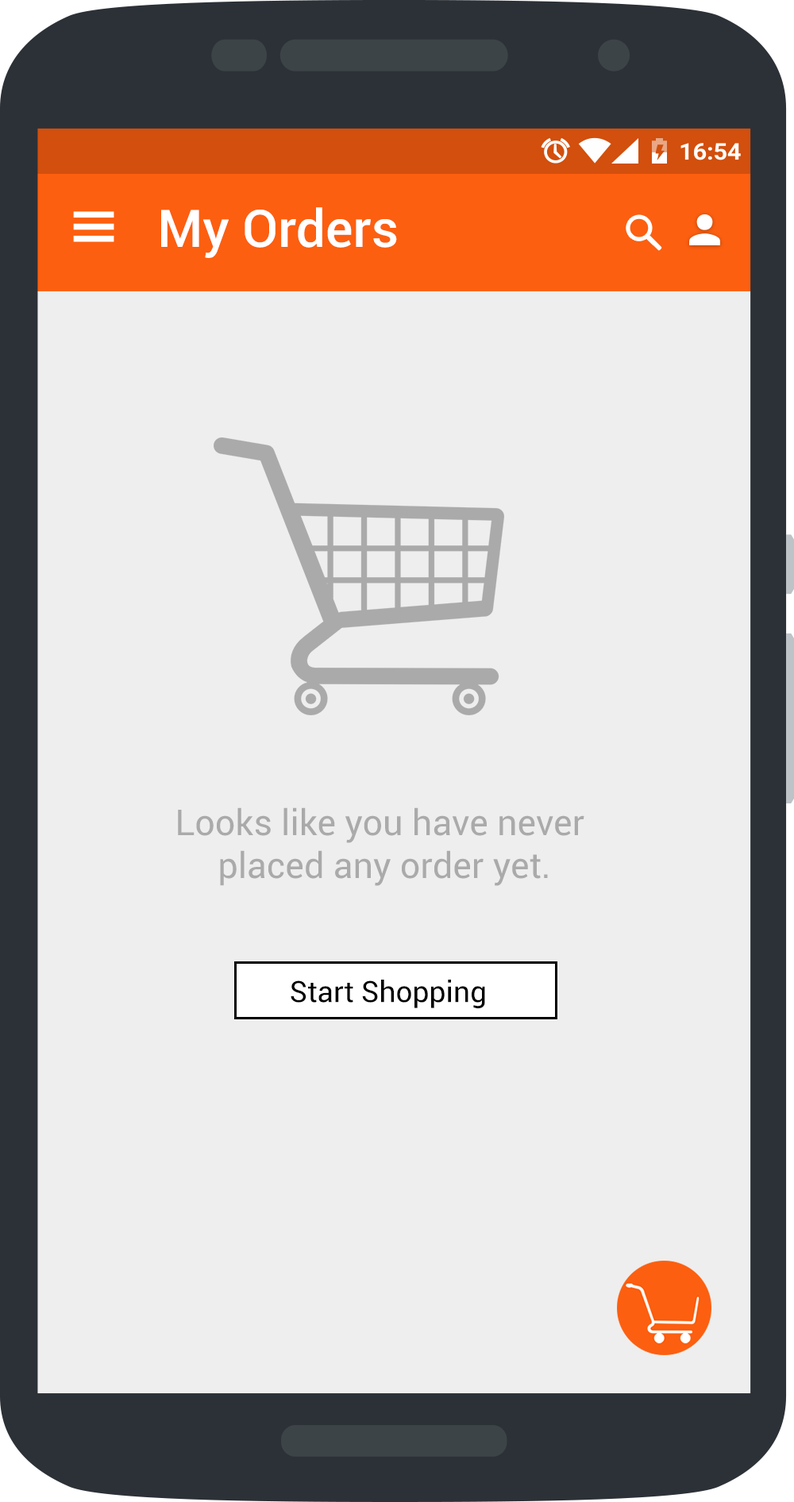
<style>
.page{position:relative;width:794px;height:1502px;background:#eeeeee}
.page>*{position:absolute;margin:0}
.t1{font:51.9px "Roboto-Medium";color:#ffffff}
.t2{font:35.7px "Roboto-Regular";color:#aaaaaa}
.t3{font:29.4px "Roboto-Regular";color:#000000}
</style>
<div class="page">
<p class="t1" style="left:161px;top:207px;width:236px;height:51px">My Orders</p>
<p class="t2" style="left:178px;top:807px;width:406px;height:79px;text-align:center">Looks like you have never <br>placed any order yet.</p>
<p class="t3" style="left:291px;top:980px;width:194px;height:29px">Start Shopping</p>
</div>
